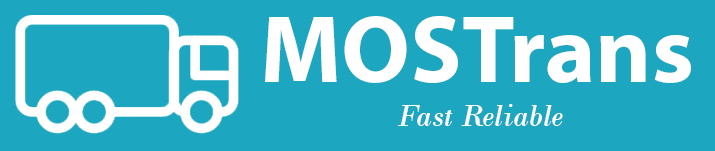
<style>
.page{position:relative;width:715px;height:151px;background:#1ca6bf}
.page>*{position:absolute;margin:0}
.t1{font:96px "MyriadPro-Bold";color:#ffffff}
.t2{font:32px "BodoniMT-Italic";color:#ffffff}
</style>
<div class="page">
<p class="t1" style="left:265px;top:16px;width:426px;height:67px">MOSTrans</p>
<p class="t2" style="left:398px;top:104px;width:165px;height:22px">Fast Reliable</p>
</div>
